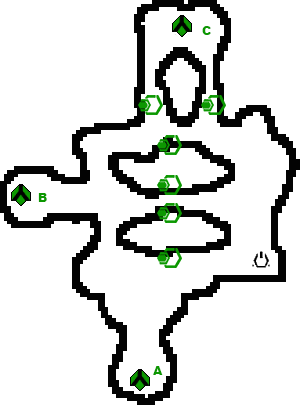
<style>
.page{position:relative;width:300px;height:405px;background:#ffffff}
.page>*{position:absolute;margin:0}
.t1{font:12px "Arial-Black";color:#0c9801}
</style>
<div class="page">
<p class="t1" style="left:202px;top:26px;width:9px;height:9px">C</p>
<p class="t1" style="left:38px;top:193px;width:9px;height:9px">B</p>
<p class="t1" style="left:153px;top:366px;width:10px;height:9px">A</p>
</div>
